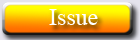
<style>
.page{position:relative;width:140px;height:40px}
.page>*{position:absolute;margin:0}
.t1{font:24px "TimesNewRomanPSMT";color:#ffffff}
</style>
<div class="page">
<p class="t1" style="left:49px;top:9px;width:49px;height:16px">Issue</p>
</div>
